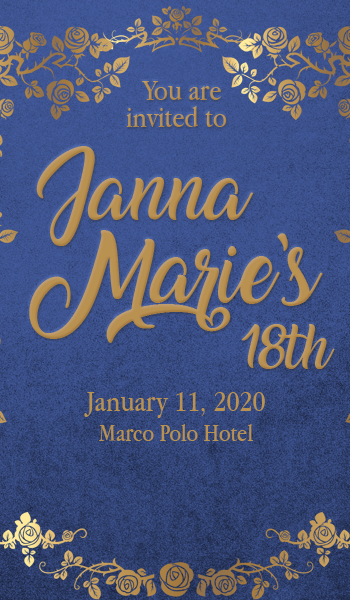
<style>
.page{position:relative;width:350px;height:600px}
.page>*{position:absolute;margin:0}
.t1{font:30px "AppleGaramond";color:#b99151}
.t2{font:55px "Amarillo";color:#b99151}
.t3{font:60px "Amarillo";color:#b99151}
.t4{font:40px "Amarillo";color:#b99151}
.t5{font:25px "AppleGaramond";color:#b99151}
</style>
<div class="page">
<p class="t1" style="left:142px;top:81px;width:79px;height:19px">You are</p>
<p class="t1" style="left:126px;top:106px;width:101px;height:21px">invited to</p>
<p class="t2" style="left:36px;top:146px;width:218px;height:100px;text-align:center">Janna</p>
<p class="t3" style="left:29px;top:230px;width:294px;height:113px;text-align:center">Marie’s</p>
<p class="t4" style="left:241px;top:324px;width:94px;height:46px">18th</p>
<p class="t1" style="left:84px;top:392px;width:181px;height:49px;text-align:center">January 11, 2020<br><span class="t5">Marco Polo Hotel</span></p>
</div>
